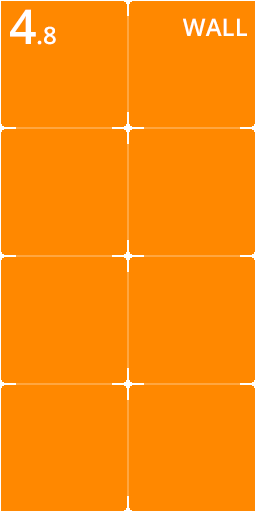
<style>
.page{position:relative;width:256px;height:512px;background:#ff8800}
.page>*{position:absolute;margin:0}
.t1{font:24px "OpenSans-Semibold";color:#ffffff}
.t2{font:48px "OpenSans-Semibold";color:#ffffff}
</style>
<div class="page">
<p class="t1" style="left:10px;top:9px;width:46px;height:36px"><span class="t2">4</span>.8</p>
<p class="t1" style="left:183px;top:18px;width:64px;height:18px">WALL</p>
</div>
